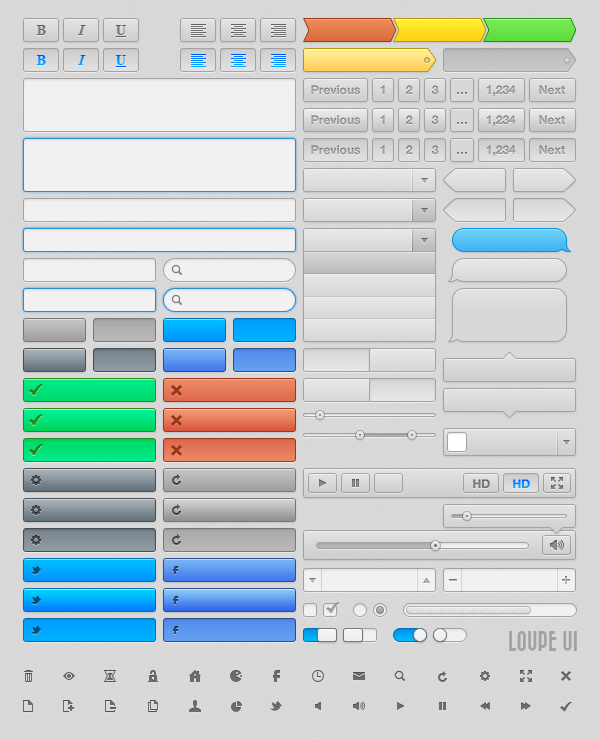
<style>
.page{position:relative;width:600px;height:740px}
.page>*{position:absolute;margin:0}
.t1{font:14px "TimesNewRomanPS-BoldMT";color:#767676}
.t2{font:14px "TimesNewRomanPS-BoldItalicMT";color:#797979}
.t3{font:14px "TimesNewRomanPS-BoldMT"}
.t4{font:14px "TimesNewRomanPS-BoldItalicMT"}
.t5{font:12px "HelveticaNeue-Bold";color:#8c8c8c}
.t6{font:12px "HelveticaNeue-Bold";color:#797979}
.t7{font:12px "HelveticaNeue-Bold"}
</style>
<div class="page">
<p class="t1" style="left:36px;top:25px;width:10px;height:10px">B</p>
<p class="t2" style="left:78px;top:25px;width:8px;height:10px">I</p>
<p class="t3" style="left:115px;top:25px;width:11px;height:10px">U</p>
<p class="t3" style="left:36px;top:55px;width:10px;height:10px">B</p>
<p class="t4" style="left:78px;top:55px;width:8px;height:10px">I</p>
<p class="t3" style="left:115px;top:55px;width:11px;height:10px">U</p>
<p class="t5" style="left:311px;top:85px;width:49px;height:10px">Previous</p>
<p class="t5" style="left:380px;top:85px;width:5px;height:9px">1</p>
<p class="t5" style="left:406px;top:85px;width:7px;height:9px">2</p>
<p class="t5" style="left:432px;top:85px;width:7px;height:10px">3</p>
<p class="t5" style="left:486px;top:85px;width:30px;height:11px">1,234</p>
<p class="t5" style="left:539px;top:85px;width:26px;height:10px">Next</p>
<p class="t5" style="left:311px;top:115px;width:49px;height:10px">Previous</p>
<p class="t5" style="left:380px;top:115px;width:5px;height:9px">1</p>
<p class="t5" style="left:406px;top:115px;width:7px;height:9px">2</p>
<p class="t5" style="left:432px;top:115px;width:7px;height:10px">3</p>
<p class="t5" style="left:486px;top:115px;width:30px;height:11px">1,234</p>
<p class="t5" style="left:539px;top:115px;width:26px;height:10px">Next</p>
<p class="t5" style="left:311px;top:145px;width:49px;height:10px">Previous</p>
<p class="t5" style="left:380px;top:145px;width:5px;height:9px">1</p>
<p class="t5" style="left:406px;top:145px;width:7px;height:9px">2</p>
<p class="t5" style="left:432px;top:145px;width:7px;height:10px">3</p>
<p class="t5" style="left:486px;top:145px;width:30px;height:11px">1,234</p>
<p class="t5" style="left:539px;top:145px;width:26px;height:10px">Next</p>
<p class="t6" style="left:473px;top:479px;width:17px;height:9px">HD</p>
<p class="t7" style="left:513px;top:479px;width:17px;height:9px">HD</p>
</div>
